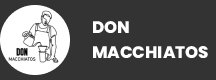
<style>
.page{position:relative;width:216px;height:80px;background:#333333}
.page>*{position:absolute;margin:0}
.t1{font:16.7px/25px "Poppins-ExtraBold";color:#ffffff}
</style>
<div class="page">
<p class="t1" style="left:93px;top:21px;width:115px;height:37px">DON<br>MACCHIATOS</p>
</div>
